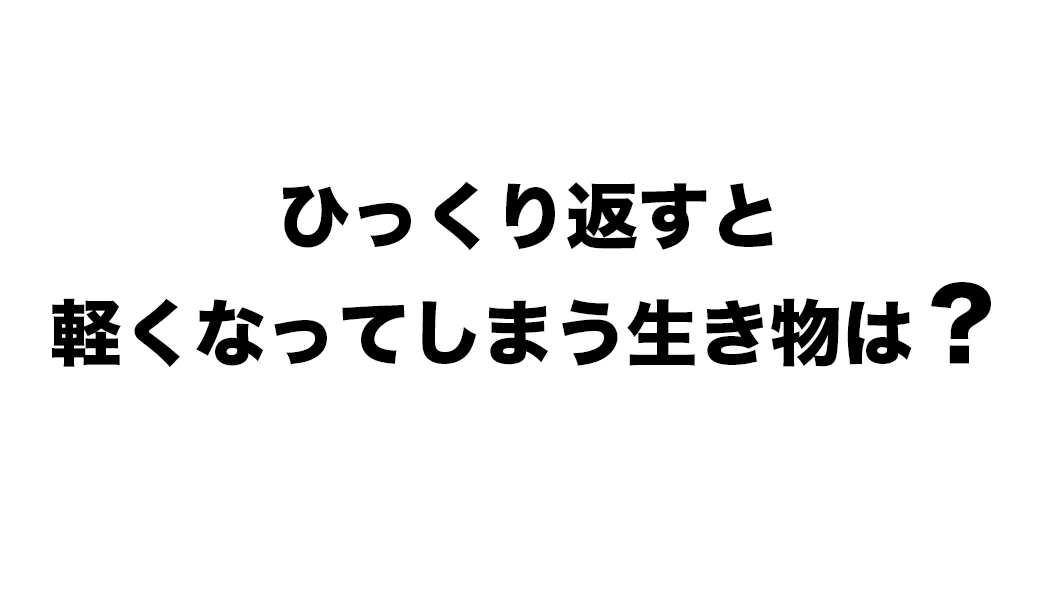
<style>
.page{position:relative;width:1060px;height:600px;background:#ffffff}
.page>*{position:absolute;margin:0}
.t1{font:72px/96px "HiraKakuStdN-W8";color:#000000}
.t2{font:96px/96px "HiraKakuStdN-W8";color:#000000}
</style>
<div class="page">
<p class="t1" style="left:52px;top:181px;width:939px;height:187px;text-align:center">ひっくり返すと<br>軽くなってしまう生き物は<span class="t2">？</span></p>
</div>
